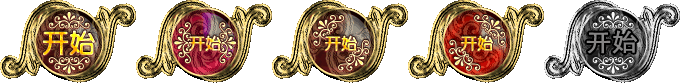
<style>
.page{position:relative;width:680px;height:83px;background:#ffffff}
.page>*{position:absolute;margin:0}
.t1{font:24px "STXihei";color:#868585;font-weight:bold;scale:1.07 1}
</style>
<div class="page">
<p class="t1" style="left:586px;top:30px;width:51px;height:24px">开始</p>
</div>
